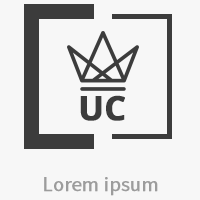
<style>
.page{position:relative;width:200px;height:200px;background:#f7f7f7}
.page>*{position:absolute;margin:0}
.t1{font:33.5px "OpenSans-Bold";color:#3c3c3c;font-weight:bold}
.t2{font:20.1px "SourceSansPro-Regular";color:#9c9c9c;font-weight:bold}
</style>
<div class="page">
<p class="t1" style="left:80px;top:95px;width:45px;height:26px">UC</p>
<p class="t2" style="left:44px;top:177px;width:114px;height:19px">Lorem ipsum</p>
</div>
